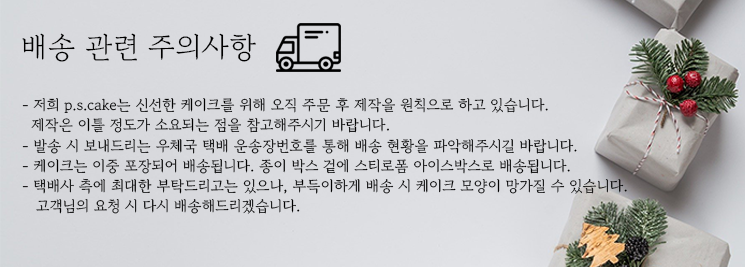
<style>
.page{position:relative;width:745px;height:267px}
.page>*{position:absolute;margin:0}
.t1{font:29.4px "GowunBatang-Regular";color:#000000}
.t2{font:15px/20.2px "GowunBatang-Regular";color:#000000}
</style>
<div class="page">
<p class="t1" style="left:22px;top:33px;width:234px;height:29px">배송 관련 주의사항</p>
<p class="t2" style="left:22px;top:98px;width:605px;height:116px">- 저희 p.s.cake는 신선한 케이크를 위해 오직 주문 후 제작을 원칙으로 하고 있습니다.<br>  제작은 이틀 정도가 소요되는 점을 참고해주시기 바랍니다.<br>- 발송 시 보내드리는 우체국 택배 운송장번호를 통해 배송 현황을 파악해주시길 바랍니다.<br>- 케이크는 이중 포장되어 배송됩니다. 종이 박스 겉에 스티로폼 아이스박스로 배송됩니다.<br>- 택배사 측에 최대한 부탁드리고는 있으나, 부득이하게 배송 시 케이크 모양이 망가질 수 있습니다.<br>   고객님의 요청 시 다시 배송해드리겠습니다.</p>
</div>
